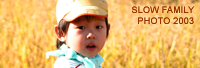
<style>
.page{position:relative;width:200px;height:68px}
.page>*{position:absolute;margin:0}
.t1{font:9px "ArialMT";letter-spacing:0.025em;color:#993300}
</style>
<div class="page">
<p class="t1" style="left:132px;top:6px;width:62px;height:23px;text-align:right">SLOW FAMILY<br>PHOTO 2003</p>
</div>
